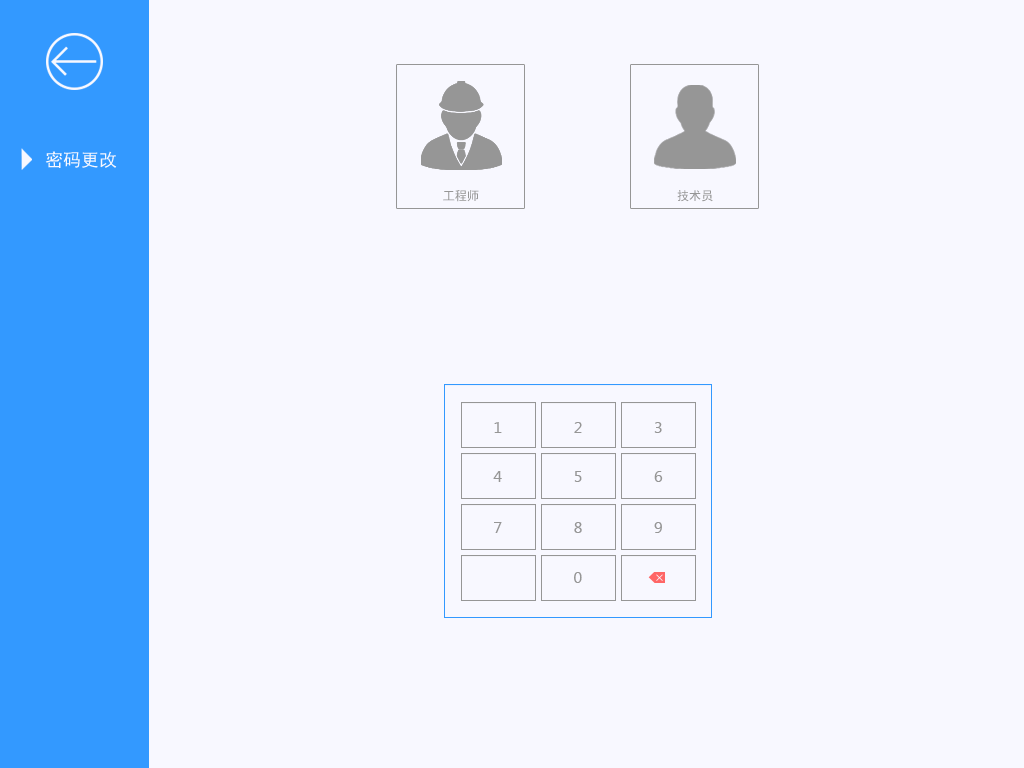
<style>
.page{position:relative;width:1024px;height:768px;background:#f8f8ff}
.page>*{position:absolute;margin:0}
.t1{font:18px "SimHei";color:#f8f8ff}
.t2{font:12.1px "SimHei";color:#969696}
</style>
<div class="page">
<p class="t1" style="left:45px;top:151px;width:72px;height:17px">密码更改</p>
<p class="t2" style="left:443px;top:190px;width:36px;height:12px">工程师</p>
<p class="t2" style="left:677px;top:190px;width:36px;height:12px">技术员</p>
</div>
